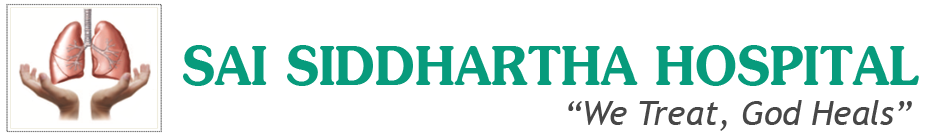
<style>
.page{position:relative;width:930px;height:136px;background:#ffffff}
.page>*{position:absolute;margin:0}
.t1{font:88px "JasmineUPCBold";color:#079b7c;scale:0.91 1}
.t2{font:34px "TrebuchetMS-Italic";color:#474747}
</style>
<div class="page">
<p class="t1" style="left:183px;top:45px;width:736px;height:41px">SAI SIDDHARTHA HOSPITAL</p>
<p class="t2" style="left:568px;top:100px;width:344px;height:31px">“We Treat, God Heals”</p>
</div>
